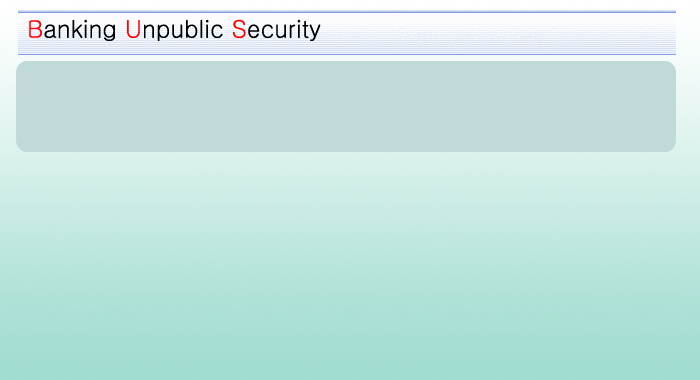
<style>
.page{position:relative;width:700px;height:380px;background:#c0d9d9}
.page>*{position:absolute;margin:0}
.t1{font:24px "Gulim";color:#000000}
.t2{font:24px "Gulim";color:#fe0009}
.t3{font:24px "Gulim";color:#ff0101}
.t4{font:24px "Gulim";color:#ff0000}
</style>
<div class="page">
<p class="t1" style="left:29px;top:19px;width:292px;height:22px"><span class="t2">B</span>anking <span class="t3">U</span>npublic <span class="t4">S</span>ecurity</p>
</div>
